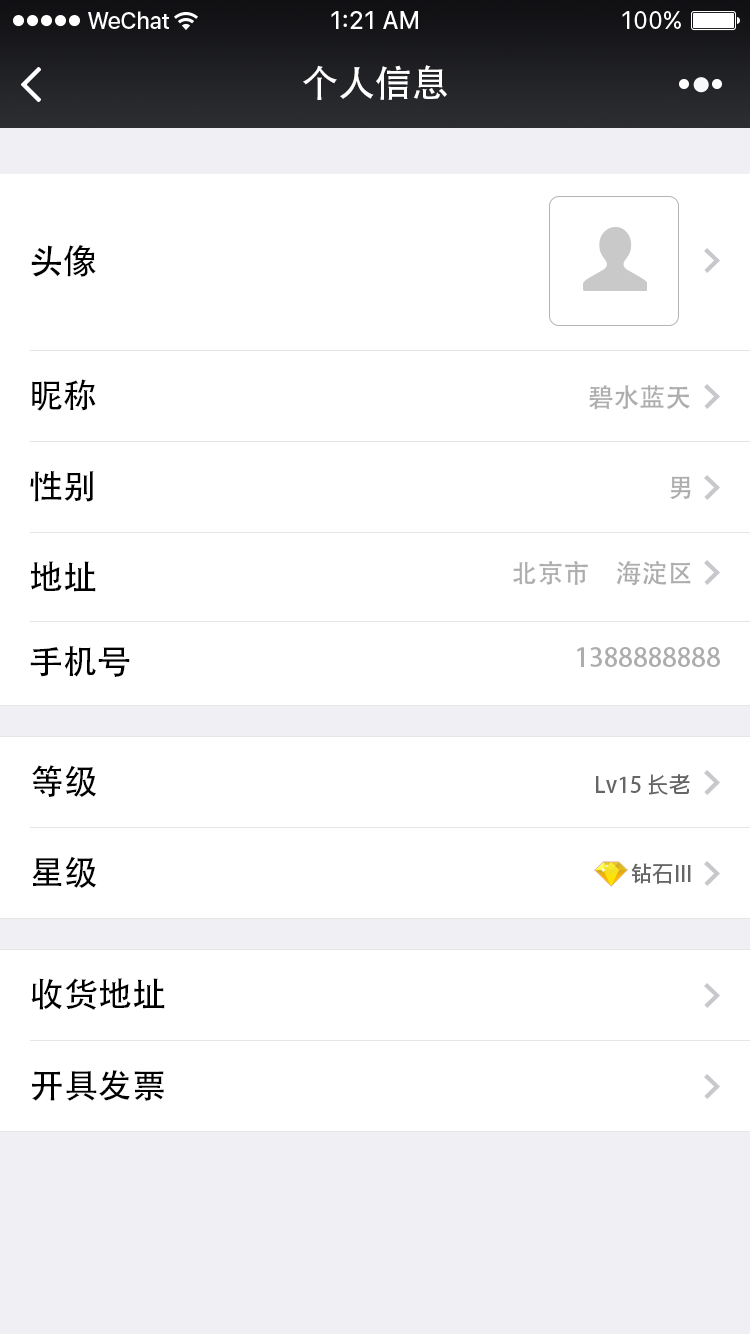
<style>
.page{position:relative;width:750px;height:1334px;background:#ffffff}
.page>*{position:absolute;margin:0}
.t1{font:37px "AdobeHeitiStd-Regular";color:#ffffff}
.t2{font:34px "AdobeHeitiStd-Regular";color:#000000}
.t3{font:26px "AdobeHeitiStd-Regular";color:#adadad}
.t4{font:22px "AdobeHeitiStd-Regular";color:#666666}
</style>
<div class="page">
<p class="t1" style="left:303px;top:65px;width:144px;height:35px">个人信息</p>
<p class="t2" style="left:31px;top:245px;width:65px;height:32px">头像</p>
<p class="t2" style="left:32px;top:379px;width:64px;height:32px">昵称</p>
<p class="t3" style="left:589px;top:385px;width:101px;height:25px">碧水蓝天</p>
<p class="t2" style="left:30px;top:471px;width:64px;height:31px">性别</p>
<p class="t3" style="left:670px;top:476px;width:21px;height:24px">男</p>
<p class="t2" style="left:31px;top:561px;width:65px;height:31px">地址</p>
<p class="t3" style="left:513px;top:560px;width:178px;height:26px">北京市　海淀区</p>
<p class="t2" style="left:30px;top:646px;width:100px;height:31px">手机号</p>
<p class="t3" style="left:577px;top:647px;width:143px;height:20px">1388888888</p>
<p class="t2" style="left:32px;top:765px;width:65px;height:32px">等级</p>
<p class="t4" style="left:596px;top:774px;width:94px;height:21px">Lv15 长老</p>
<p class="t2" style="left:32px;top:856px;width:65px;height:32px">星级</p>
<p class="t4" style="left:631px;top:863px;width:60px;height:21px">钻石III</p>
<p class="t2" style="left:31px;top:978px;width:134px;height:32px">收货地址</p>
<p class="t2" style="left:32px;top:1070px;width:132px;height:31px">开具发票</p>
</div>
